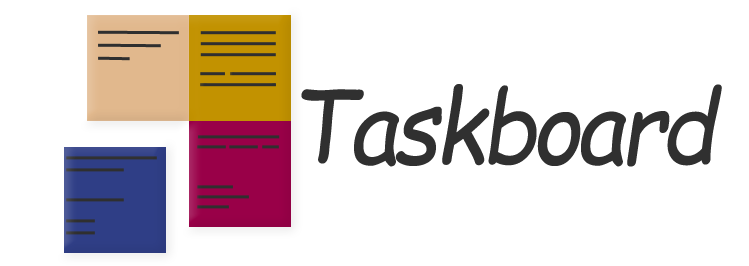
<style>
.page{position:relative;width:749px;height:266px;background:#ffffff}
.page>*{position:absolute;margin:0}
.t1{font:100.8px "ComicSansMS-Italic";letter-spacing:-0.05em;color:#303030;scale:0.93 1}
</style>
<div class="page">
<p class="t1" style="left:301px;top:84px;width:421px;height:83px">Taskboard</p>
</div>
